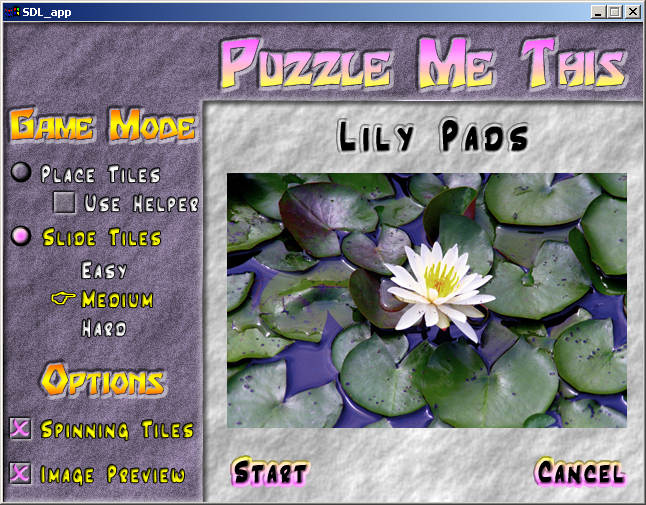
<style>
.page{position:relative;width:646px;height:505px}
.page>*{position:absolute;margin:0}
.t1{font:54px "Houters-Normal";font-variant:small-caps;font-weight:bold}
.t2{font:34px "Houters-Normal";font-variant:small-caps;font-weight:bold}
.t3{font:42px "Inkpen2Script";letter-spacing:0.15em;color:#000000;font-weight:bold}
.t4{font:24px "Inkpen2Script";letter-spacing:0.1em;font-weight:bold}
.t5{font:30px "Inkpen2Script";letter-spacing:0.1em;color:#000000;font-weight:bold}
</style>
<div class="page">
<p class="t1" style="left:222px;top:39px;width:403px;height:49px">Puzzle Me This</p>
<p class="t2" style="left:11px;top:108px;width:184px;height:33px">Game Mode</p>
<p class="t3" style="left:340px;top:120px;width:187px;height:31px">Lily Pads</p>
<p class="t4" style="left:41px;top:165px;width:119px;height:18px">Place Tiles</p>
<p class="t4" style="left:85px;top:194px;width:113px;height:19px">Use Helper</p>
<p class="t4" style="left:43px;top:228px;width:117px;height:18px">Slide Tiles</p>
<p class="t4" style="left:82px;top:261px;width:71px;height:76px">Easy<br>Medium<br>Hard</p>
<p class="t2" style="left:42px;top:364px;width:122px;height:31px">Options</p>
<p class="t4" style="left:41px;top:420px;width:152px;height:21px">Spinning Tiles</p>
<p class="t5" style="left:234px;top:460px;width:389px;height:23px">Start                 Cancel</p>
<p class="t4" style="left:41px;top:465px;width:143px;height:21px">Image Preview</p>
</div>
